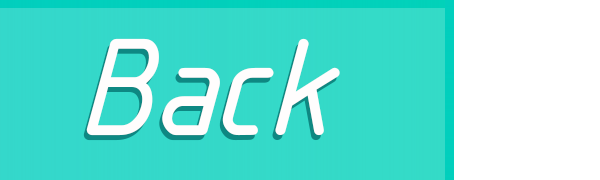
<style>
.page{position:relative;width:600px;height:180px;background:#ffffff}
.page>*{position:absolute;margin:0}
.t1{font:144px "Isonorm-Italic";color:#fffefe}
</style>
<div class="page">
<p class="t1" style="left:86px;top:38px;width:254px;height:98px">Back</p>
</div>
